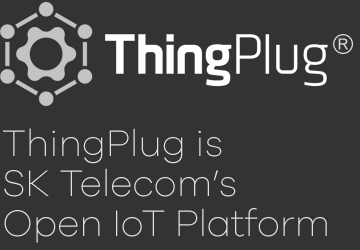
<style>
.page{position:relative;width:360px;height:250px;background:#333333}
.page>*{position:absolute;margin:0}
.t1{font:15.3px "ArialMT";color:#f0f0f2}
.t2{font:38px/40px "GalanoGrotesque-ExtraLight";letter-spacing:-0.011em;color:#e1e1e1}
</style>
<div class="page">
<p class="t1" style="left:338px;top:38px;width:10px;height:12px">R</p>
<p class="t2" style="left:3px;top:128px;width:324px;height:115px">ThingPlug is  <br>SK Telecom’s<br>Open IoT Platform</p>
</div>
